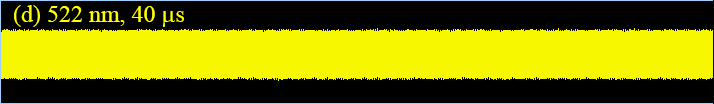
<style>
.page{position:relative;width:714px;height:104px;background:#f7f700}
.page>*{position:absolute;margin:0}
.t1{font:24px "TimesNewRomanPSMT";color:#ffff00}
.t2{font:24px "SymbolMT";color:#ffff00}
</style>
<div class="page">
<p class="t1" style="left:14px;top:5px;width:170px;height:22px">(d) 522 nm, 40 <span class="t2">m</span>s</p>
</div>
